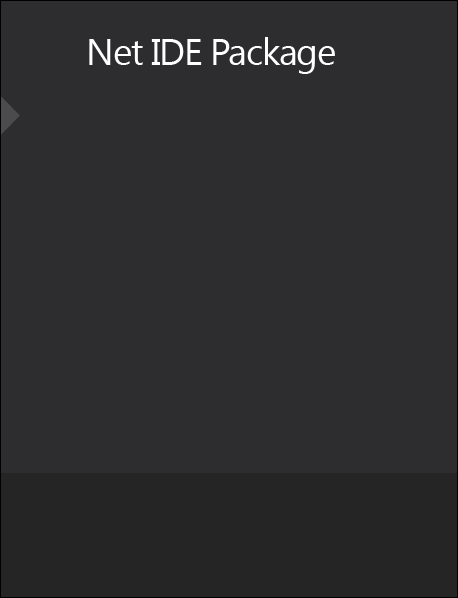
<style>
.page{position:relative;width:458px;height:598px;background:#2d2d30}
.page>*{position:absolute;margin:0}
.t1{font:37.3px "SegoeUI";letter-spacing:-0.04em;color:#ffffff}
</style>
<div class="page">
<p class="t1" style="left:89px;top:37px;width:246px;height:37px">Net IDE Package</p>
</div>
